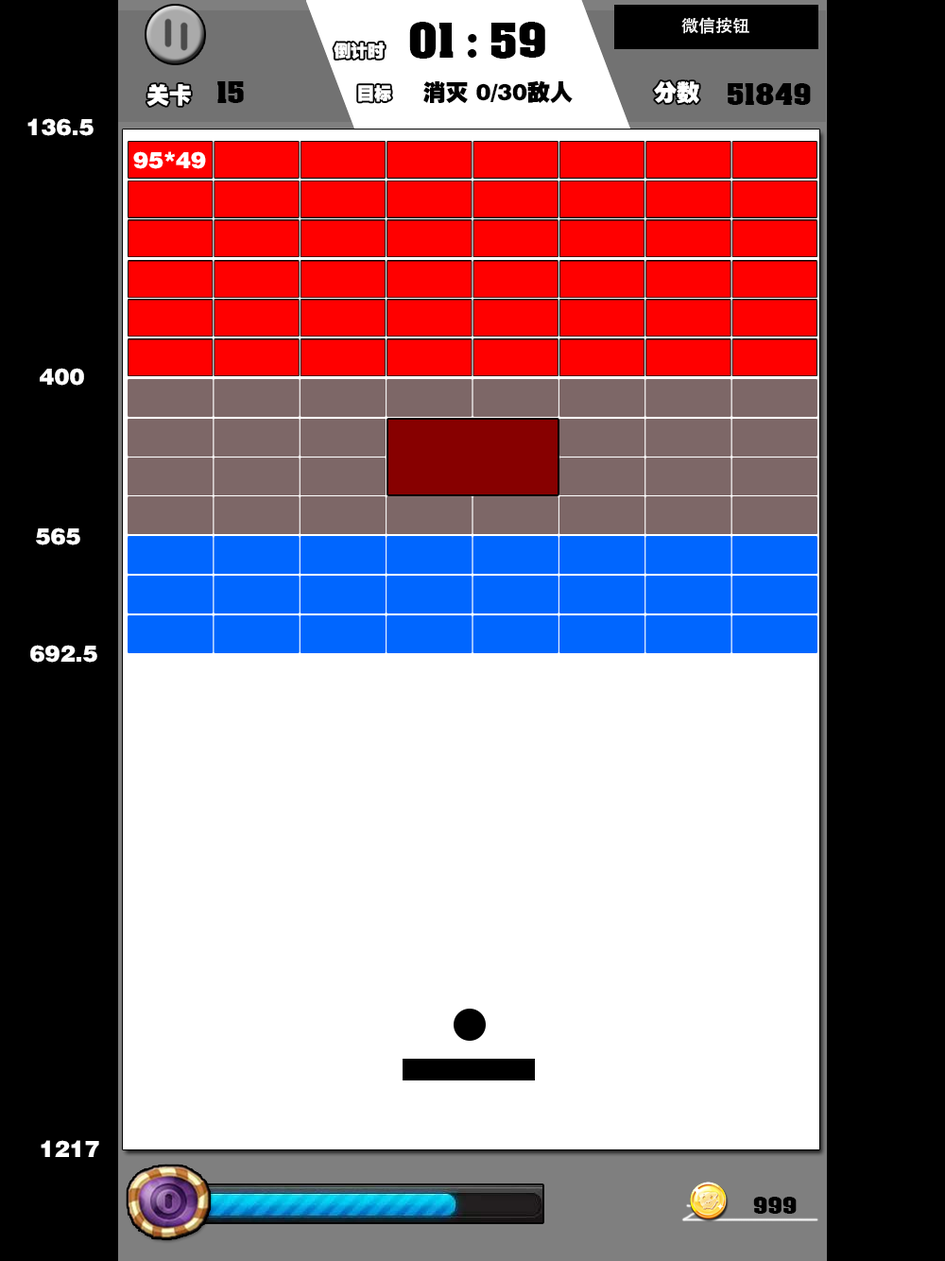
<style>
.page{position:relative;width:945px;height:1261px;background:#ffffff}
.page>*{position:absolute;margin:0}
.t1{font:17px "AdobeHeitiStd-Regular";color:#ffffff}
.t2{font:45.4px "AcmeFont";color:#000000}
.t3{font:17px "FZCCHJW--GB1-0";color:#ffffff}
.t4{font:22.7px "FZCCHJW--GB1-0";color:#ffffff}
.t5{font:28.4px "AcmeFont";color:#000000}
.t6{font:22.7px "FZCCHJW--GB1-0";color:#000000}
.t7{font:22.7px "AcmeFont";color:#000000}
</style>
<div class="page">
<p class="t1" style="left:682px;top:17px;width:68px;height:17px">微信按钮</p>
<p class="t2" style="left:409px;top:22px;width:137px;height:37px">01 : 59</p>
<p class="t3" style="left:334px;top:43px;width:51px;height:17px">倒计时</p>
<p class="t4" style="left:147px;top:84px;width:44px;height:22px">关卡</p>
<p class="t5" style="left:217px;top:81px;width:27px;height:22px">15</p>
<p class="t3" style="left:358px;top:85px;width:33px;height:17px">目标</p>
<p class="t6" style="left:424px;top:80px;width:149px;height:24px">消灭 0/30敌人</p>
<p class="t4" style="left:654px;top:81px;width:46px;height:23px">分数</p>
<p class="t5" style="left:728px;top:83px;width:83px;height:22px">51849</p>
<p class="t4" style="left:27px;top:118px;width:67px;height:18px">136.5</p>
<p class="t4" style="left:133px;top:151px;width:73px;height:18px">95*49</p>
<p class="t4" style="left:40px;top:368px;width:44px;height:18px">400</p>
<p class="t4" style="left:36px;top:528px;width:44px;height:18px">565</p>
<p class="t4" style="left:30px;top:645px;width:67px;height:18px">692.5</p>
<p class="t4" style="left:41px;top:1140px;width:58px;height:17px">1217</p>
<p class="t7" style="left:754px;top:1197px;width:43px;height:17px">999</p>
</div>
